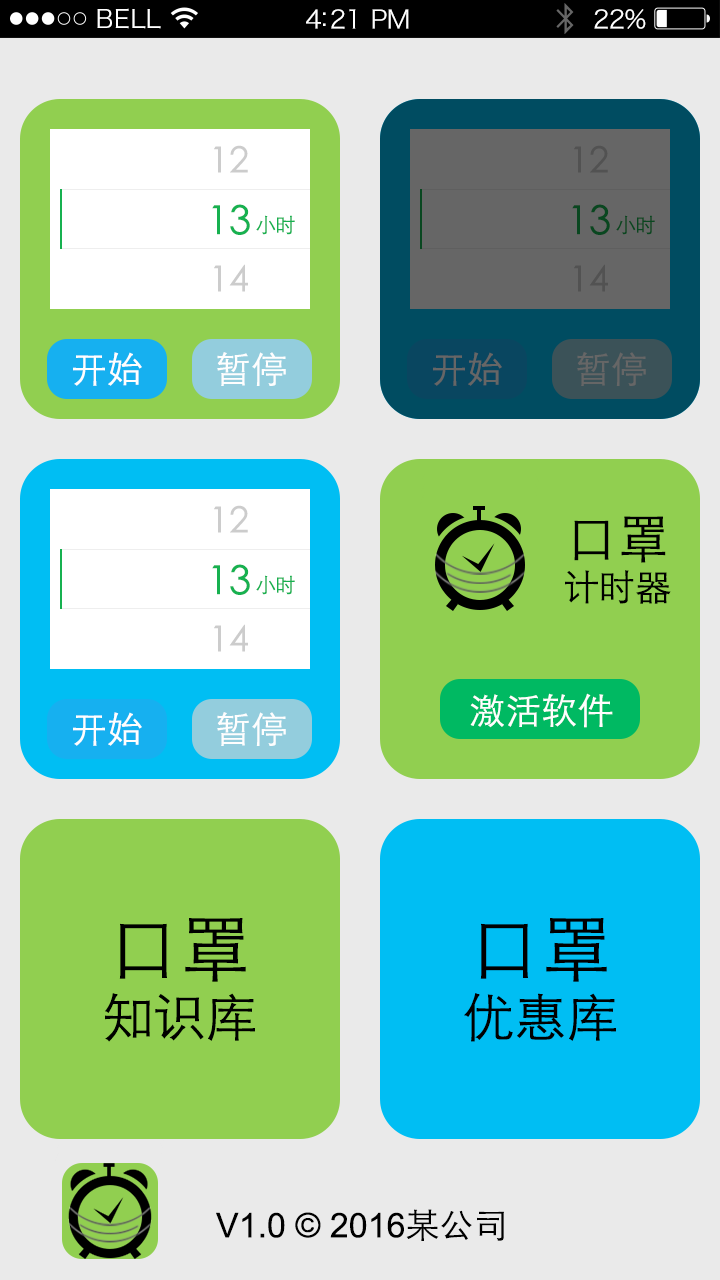
<style>
.page{position:relative;width:720px;height:1280px;background:#eaeaea}
.page>*{position:absolute;margin:0}
.t1{font:25.1px "HiraginoSansGB-W3";letter-spacing:0.02em;color:#ffffff}
.t2{font:25.1px "HiraginoSansGB-W3";letter-spacing:-0.02em;color:#ffffff}
.t3{font:36px "STHeitiSC-Light";color:#cccccc}
.t4{font:36px "STHeitiSC-Light";color:#525252}
.t5{font:40px "STHeitiSC-Light";color:#17b150}
.t6{font:40px "STHeitiSC-Light";color:#094720}
.t7{font:20px "STHeitiSC-Light";color:#17b150}
.t8{font:20px "STHeitiSC-Light";color:#094720}
.t9{font:36px "STHeitiSC-Light";color:#fefefe}
.t10{font:36px "STHeitiSC-Light";color:#666666}
.t11{font:36px "STHeitiSC-Light";color:#000000}
.t12{font:52px "STHeitiSC-Light";color:#000000}
.t13{font:72px "STHeitiSC-Light";color:#000000}
.t14{font:34px "ArialMT";color:#000000}
.t15{font:34px "STHeitiSC-Light";color:#000000}
</style>
<div class="page">
<p class="t1" style="left:97px;top:8px;width:64px;height:21px">BELL</p>
<p class="t2" style="left:306px;top:9px;width:103px;height:20px">4:21 PM</p>
<p class="t2" style="left:594px;top:9px;width:52px;height:20px">22%</p>
<p class="t3" style="left:214px;top:145px;width:34px;height:28px">12</p>
<p class="t4" style="left:574px;top:145px;width:34px;height:28px">12</p>
<p class="t5" style="left:212px;top:204px;width:38px;height:31px">13</p>
<p class="t6" style="left:572px;top:204px;width:38px;height:31px">13</p>
<p class="t7" style="left:256px;top:215px;width:39px;height:20px">小时</p>
<p class="t8" style="left:616px;top:215px;width:39px;height:20px">小时</p>
<p class="t3" style="left:214px;top:264px;width:34px;height:28px">14</p>
<p class="t4" style="left:574px;top:264px;width:34px;height:28px">14</p>
<p class="t9" style="left:73px;top:352px;width:69px;height:34px">开始</p>
<p class="t9" style="left:217px;top:352px;width:69px;height:34px">暂停</p>
<p class="t10" style="left:433px;top:352px;width:69px;height:34px">开始</p>
<p class="t10" style="left:577px;top:352px;width:69px;height:34px">暂停</p>
<p class="t3" style="left:214px;top:505px;width:34px;height:28px">12</p>
<p class="t11" style="left:565px;top:516px;width:106px;height:88px;text-align:center"><span class="t12">口罩<br></span>计时器</p>
<p class="t5" style="left:212px;top:564px;width:38px;height:31px">13</p>
<p class="t7" style="left:256px;top:575px;width:39px;height:20px">小时</p>
<p class="t3" style="left:214px;top:624px;width:34px;height:28px">14</p>
<p class="t9" style="left:470px;top:693px;width:143px;height:35px">激活软件</p>
<p class="t9" style="left:73px;top:712px;width:69px;height:34px">开始</p>
<p class="t9" style="left:217px;top:712px;width:69px;height:34px">暂停</p>
<p class="t12" style="left:105px;top:918px;width:150px;height:124px;text-align:center"><span class="t13">口罩<br></span>知识库</p>
<p class="t12" style="left:464px;top:918px;width:152px;height:124px;text-align:center"><span class="t13">口罩<br></span>优惠库</p>
<p class="t14" style="left:216px;top:1209px;width:288px;height:32px">V1.0 © 2016<span class="t15">某公司</span></p>
</div>
